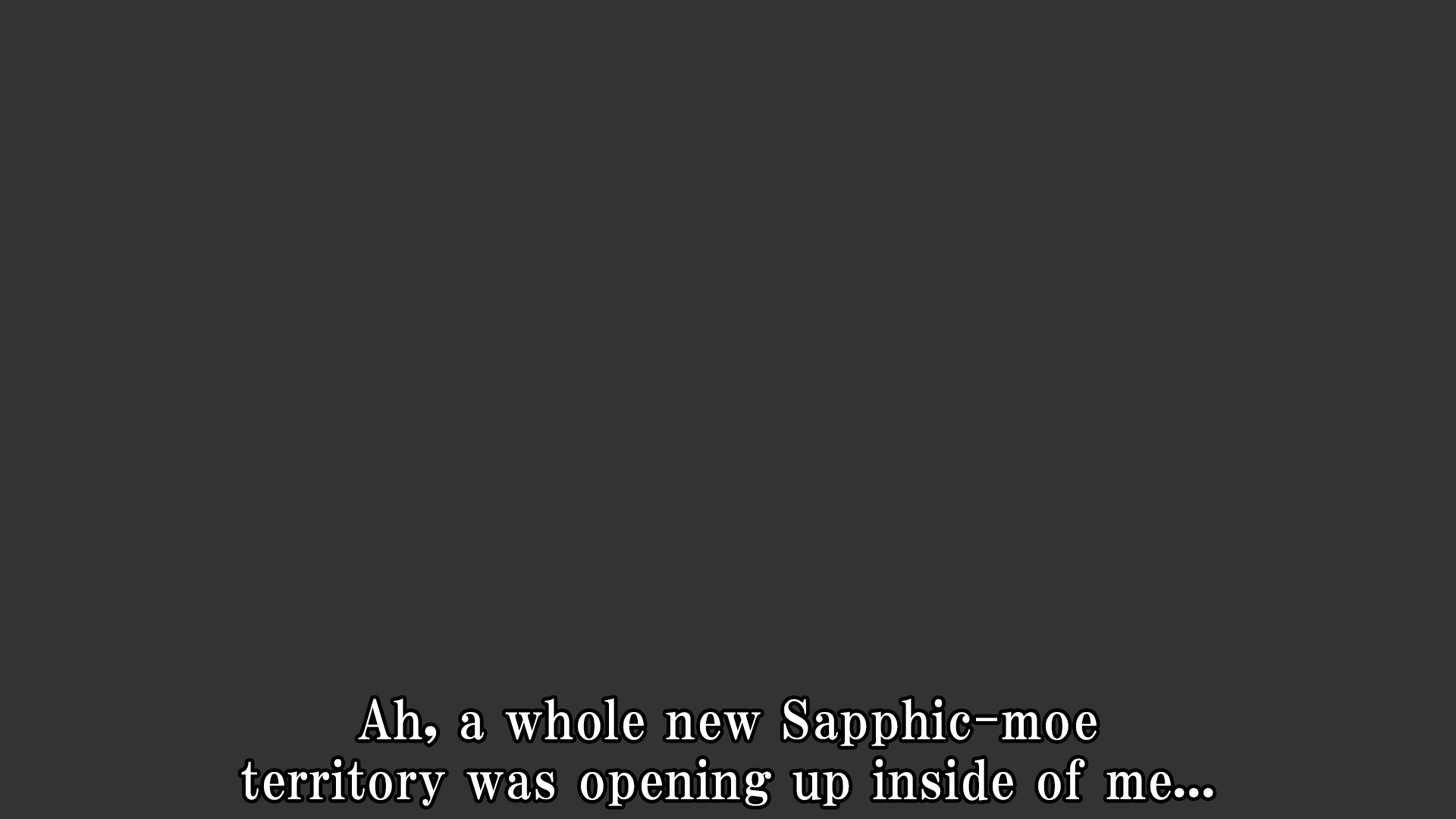
<style>
.page{position:relative;width:1456px;height:819px;background:#333333}
.page>*{position:absolute;margin:0}
.t1{font:53.1px/59.9px "HGPMinchoE";letter-spacing:0.025em;color:#ffffff}
</style>
<div class="page">
<p class="t1" style="left:241px;top:698px;width:972px;height:108px;text-align:center">Ah, a whole new Sapphic-moe<br>territory was opening up inside of me...</p>
</div>
